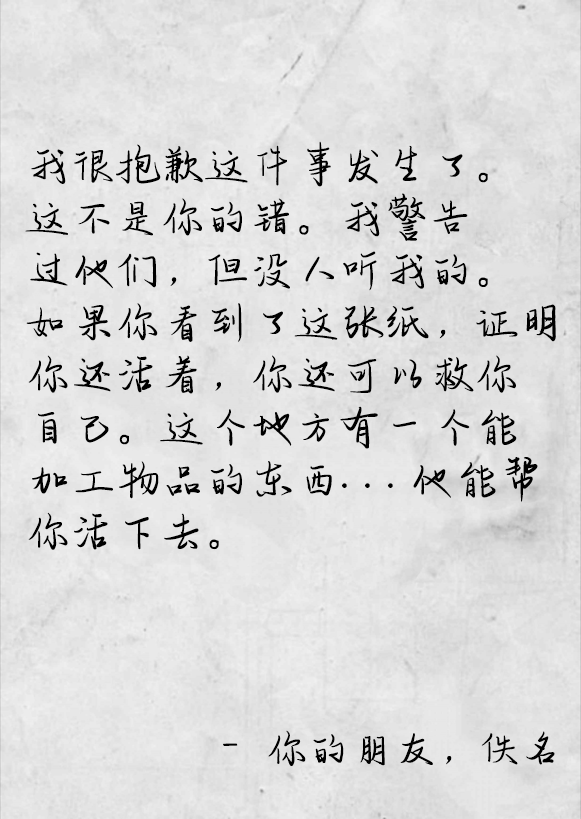
<style>
.page{position:relative;width:581px;height:819px}
.page>*{position:absolute;margin:0}
.t1{font:43.7px "zihun51hao-qingqingziyinti";color:#000000;font-weight:bold}
.t2{font:41.5px "zihun51hao-qingqingziyinti";color:#000000;font-weight:bold}
</style>
<div class="page">
<p class="t1" style="left:25px;top:141px;width:531px;height:409px">我很抱歉这件事发生了。<br>这不是你的错。我警告<br>过他们，但没人听我的。<br>如果你看到了这张纸，证明<br>你还活着，你还可以救你<br>自己。这个地方有一个能<br>加工物品的东西...他能帮<br>你活下去。</p>
<p class="t2" style="left:223px;top:730px;width:332px;height:36px">- 你的朋友，佚名</p>
</div>
